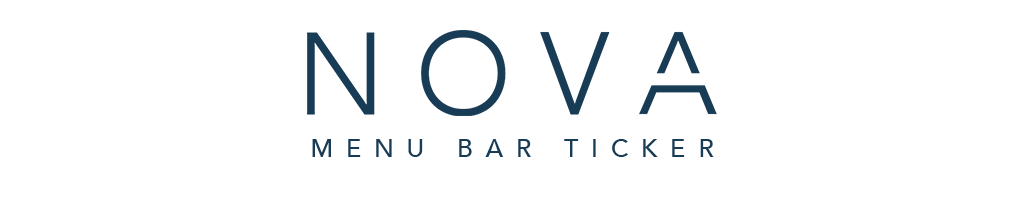
<style>
.page{position:relative;width:1024px;height:204px;background:#ffffff}
.page>*{position:absolute;margin:0}
.t1{font:25px "Avenir-Medium";letter-spacing:0.512em;color:#193c56}
</style>
<div class="page">
<p class="t1" style="left:312px;top:139px;width:402px;height:18px">MENU BAR TICKER</p>
</div>
